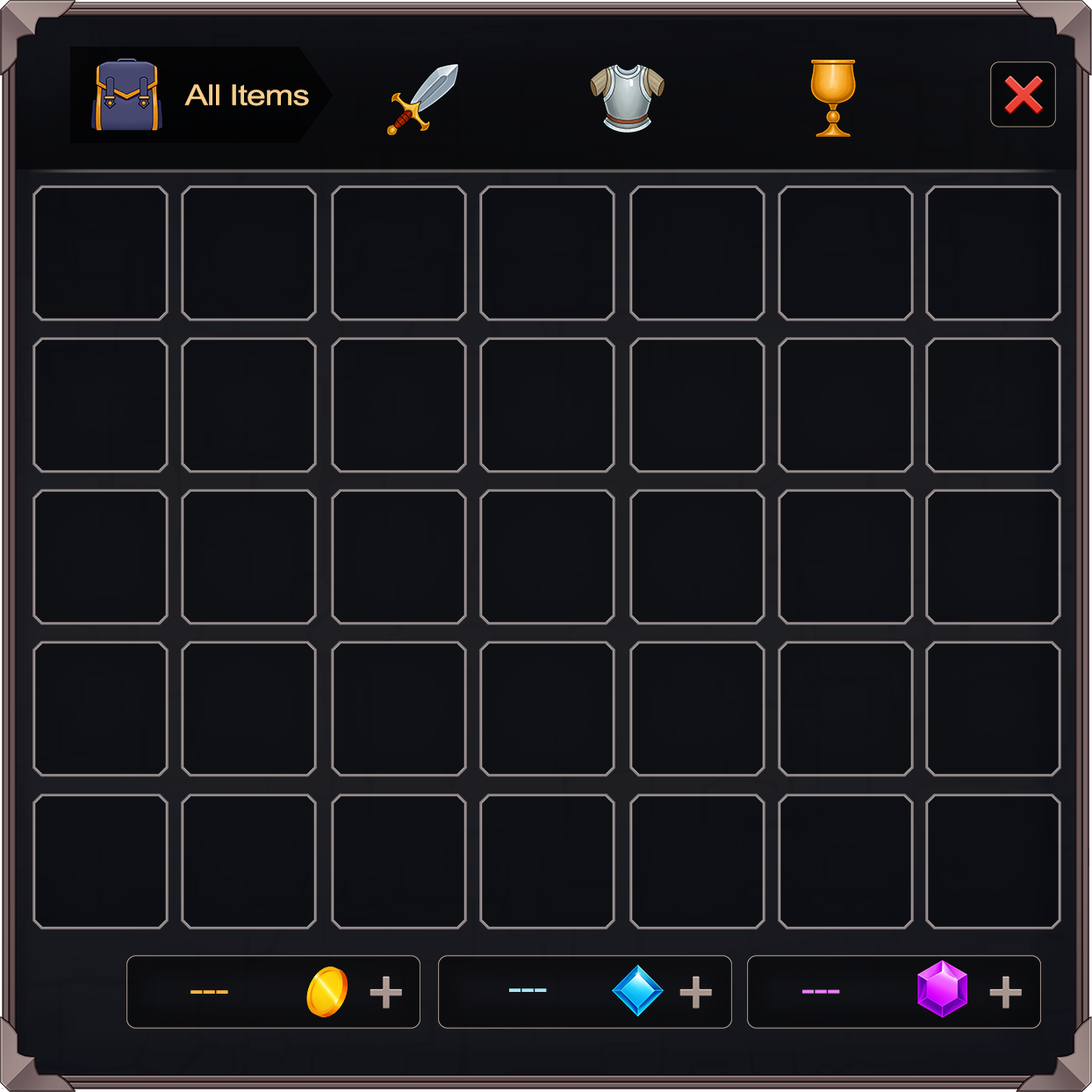
<style>
.page{position:relative;width:1092px;height:1092px}
.page>*{position:absolute;margin:0}
.t1{font:28.6px "ArialMT";letter-spacing:-0.025em;color:#f9ce8b;scale:1.2 1}
.t2{font:34.7px "ArialMT";letter-spacing:-0.025em;color:#a7e5f2;scale:1.2 1}
.t3{font:34.7px "ArialMT";letter-spacing:-0.025em;color:#e97ff2;scale:1.2 1}
.t4{font:34.7px "ArialMT";letter-spacing:-0.025em;color:#ffb33c;scale:1.2 1}
</style>
<div class="page">
<p class="t1" style="left:184px;top:84px;width:125px;height:22px">All Items</p>
<p class="t2" style="left:509px;top:988px;width:38px;height:4px">---</p>
<p class="t3" style="left:802px;top:989px;width:38px;height:5px">---</p>
<p class="t4" style="left:190px;top:990px;width:38px;height:4px">---</p>
</div>
